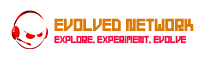
<style>
.page{position:relative;width:200px;height:60px;background:#ffffff}
.page>*{position:absolute;margin:0}
.t1{font:14px "Rust";color:#dc7a07;text-transform:uppercase}
.t2{font:8px "Rust";color:#f10940;text-transform:uppercase}
</style>
<div class="page">
<p class="t1" style="left:54px;top:18px;width:140px;height:13px">Evolved Network</p>
<p class="t2" style="left:54px;top:35px;width:133px;height:9px">Explore, Experiment, Evolve</p>
</div>
